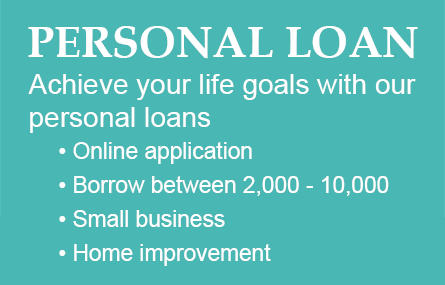
<style>
.page{position:relative;width:445px;height:285px;background:#49b8b4}
.page>*{position:absolute;margin:0}
.t1{font:44px "BookAntiqua-Bold";color:#ffffff}
.t2{font:28.1px "ArialMT";color:#ffffff}
.t3{font:22.7px/34px "ArialMT";color:#ffffff}
</style>
<div class="page">
<p class="t1" style="left:28px;top:26px;width:390px;height:33px">PERSONAL LOAN</p>
<p class="t2" style="left:28px;top:74px;width:388px;height:59px">Achieve your life goals with our <br>personal loans</p>
<p class="t3" style="left:59px;top:142px;width:330px;height:124px">• Online application<br> • Borrow between 2,000 - 10,000<br> • Small business<br> • Home improvement</p>
</div>
